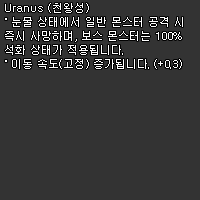
<style>
.page{position:relative;width:200px;height:200px;background:#333333}
.page>*{position:absolute;margin:0}
.t1{font:11px/14px "Dotum";color:#ffffff}
</style>
<div class="page">
<p class="t1" style="left:5px;top:3px;width:178px;height:66px">Uranus (천왕성)<br>˚ 눈물 상태에서 일반 몬스터 공격 시<br>즉시 사망하며, 보스 몬스터는 100%<br>석화 상태가 적용됩니다.<br>˚ 이동 속도(고정) 증가됩니다. (+0.3)</p>
</div>
